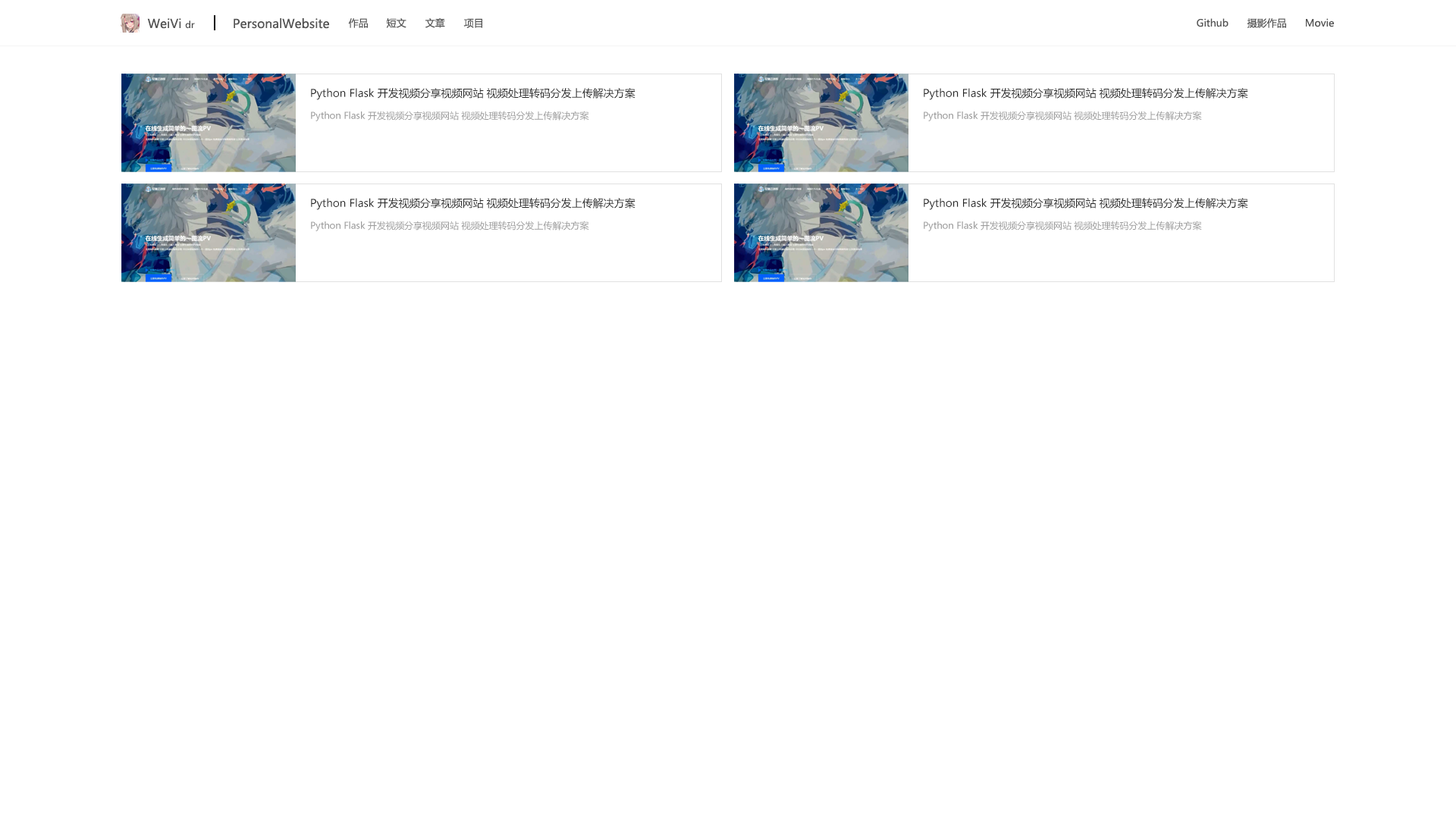
<style>
.page{position:relative;width:1456px;height:819px;background:#ffffff}
.page>*{position:absolute;margin:0}
.t1{font:10.6px "MicrosoftYaHeiUI";color:#282828}
.t2{font:9.1px "MicrosoftYaHeiUI";color:#9b9b9b}
</style>
<div class="page">
<p class="t1" style="left:311px;top:88px;width:324px;height:12px">Python Flask 开发视频分享视频网站 视频处理转码分发上传解决方案</p>
<p class="t1" style="left:924px;top:88px;width:324px;height:12px">Python Flask 开发视频分享视频网站 视频处理转码分发上传解决方案</p>
<p class="t2" style="left:311px;top:111px;width:278px;height:10px">Python Flask 开发视频分享视频网站 视频处理转码分发上传解决方案</p>
<p class="t2" style="left:924px;top:111px;width:278px;height:10px">Python Flask 开发视频分享视频网站 视频处理转码分发上传解决方案</p>
<p class="t1" style="left:311px;top:198px;width:324px;height:12px">Python Flask 开发视频分享视频网站 视频处理转码分发上传解决方案</p>
<p class="t1" style="left:924px;top:198px;width:324px;height:12px">Python Flask 开发视频分享视频网站 视频处理转码分发上传解决方案</p>
<p class="t2" style="left:311px;top:221px;width:278px;height:10px">Python Flask 开发视频分享视频网站 视频处理转码分发上传解决方案</p>
<p class="t2" style="left:924px;top:221px;width:278px;height:10px">Python Flask 开发视频分享视频网站 视频处理转码分发上传解决方案</p>
</div>
